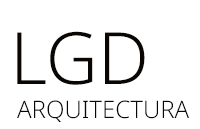
<style>
.page{position:relative;width:200px;height:129px;background:#ffffff}
.page>*{position:absolute;margin:0}
.t1{font:72px "NotoSans-Light";color:#0a0603}
.t2{font:24px "NotoSans-Light";color:#0a0603}
</style>
<div class="page">
<p class="t1" style="left:17px;top:31px;width:128px;height:54px">LGD</p>
<p class="t2" style="left:17px;top:100px;width:172px;height:22px">ARQUITECTURA</p>
</div>
